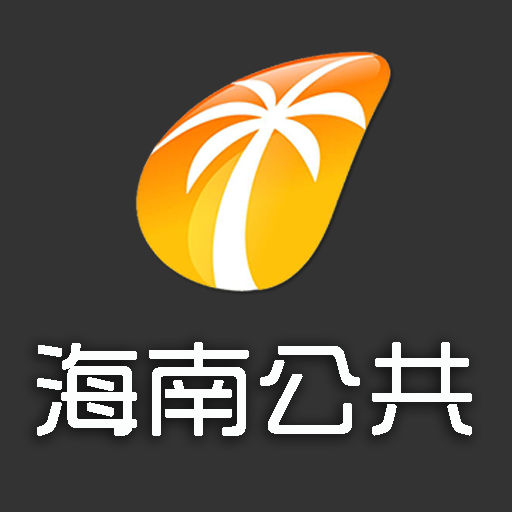
<style>
.page{position:relative;width:512px;height:512px;background:#333333}
.page>*{position:absolute;margin:0}
.t1{font:106.7px "SJshishang-Regular";letter-spacing:0.02em;color:#fcfdfd;font-weight:bold}
</style>
<div class="page">
<p class="t1" style="left:37px;top:342px;width:435px;height:94px">海南公共</p>
</div>
